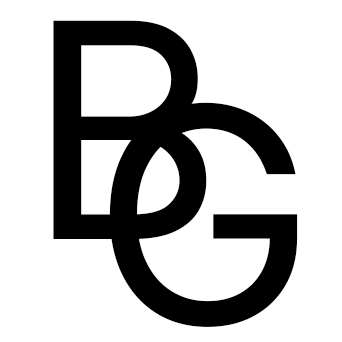
<style>
.page{position:relative;width:342px;height:342px;background:#ffffff}
.page>*{position:absolute;margin:0}
.t1{font:300px "Inter-Regular";color:#000000}
</style>
<div class="page">
<p class="t1" style="left:53px;top:20px;width:154px;height:219px">B</p>
<p class="t1" style="left:109px;top:102px;width:189px;height:225px">G</p>
</div>
